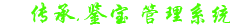
<style>
.page{position:relative;width:230px;height:28px;background:#ffffff}
.page>*{position:absolute;margin:0}
.t1{font:24px "STXingkai";color:#49fb03}
</style>
<div class="page">
<p class="t1" style="left:31px;top:2px;width:201px;height:23px">传承.鉴宝 管理系统</p>
</div>
